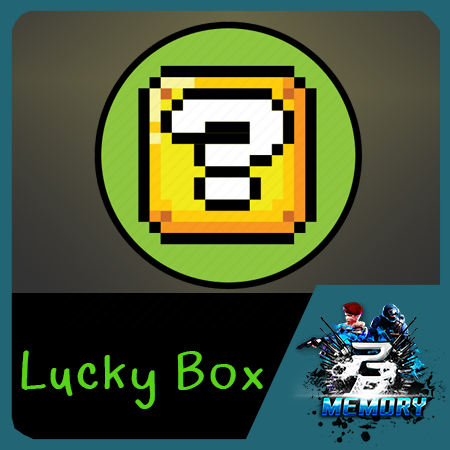
<style>
.page{position:relative;width:450px;height:450px;background:#000000}
.page>*{position:absolute;margin:0}
.t1{font:53.8px "iannnnnDOG-Regular";color:#57d419}
</style>
<div class="page">
<p class="t1" style="left:21px;top:350px;width:242px;height:59px">Lucky Box</p>
</div>
